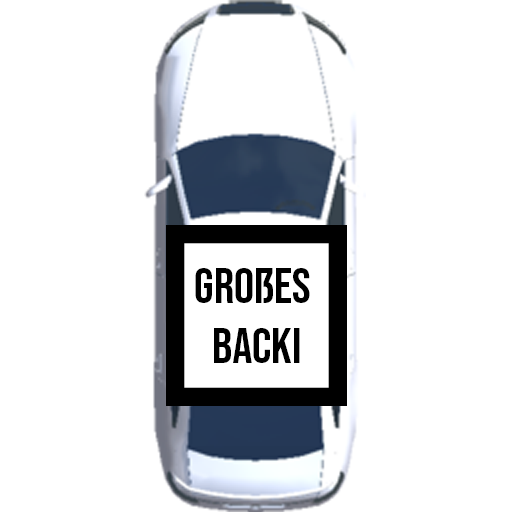
<style>
.page{position:relative;width:512px;height:512px;background:#ffffff}
.page>*{position:absolute;margin:0}
.t1{font:50px "BebasNeue-Regular";color:#000000}
</style>
<div class="page">
<p class="t1" style="left:195px;top:268px;width:115px;height:95px;text-align:center">Großes <br>Backi</p>
</div>
